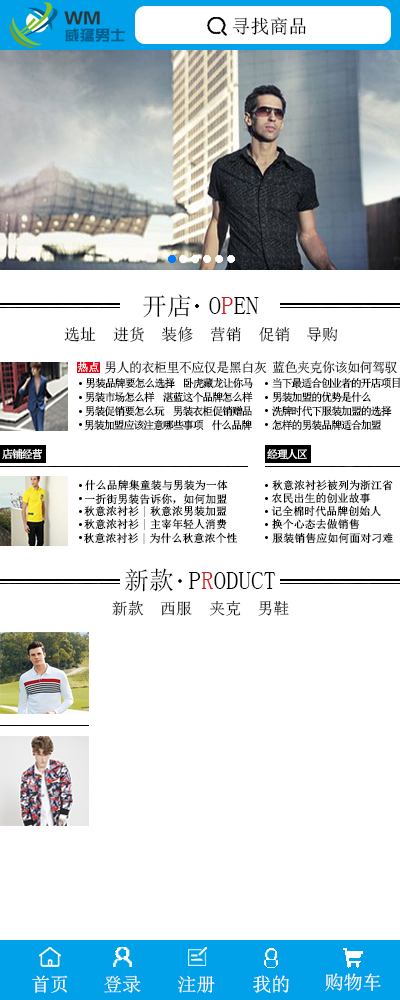
<style>
.page{position:relative;width:400px;height:1000px;background:#ffffff}
.page>*{position:absolute;margin:0}
.t1{font:19px "SimSun";color:#000000}
.t2{font:25px "SimSun";color:#000000}
.t3{font:25px "SimSun";color:#d01a21}
.t4{font:16px "SimSun";color:#000000}
.t5{font:11px "NSimSun";color:#ffffff}
.t6{font:13.2px "NSimSun";letter-spacing:-0.049em;color:#000000}
.t7{font:11px "NSimSun";letter-spacing:-0.1em;color:#000000}
.t8{font:12px "NSimSun";letter-spacing:-0.1em;color:#000000}
.t9{font:11px "NSimSun";letter-spacing:-0.1em;color:#ffffff}
.t10{font:11px "SimSun";color:#000000}
.t11{font:19px "SimSun";color:#ffffff}
</style>
<div class="page">
<p class="t1" style="left:232px;top:17px;width:74px;height:18px">寻找商品</p>
<p class="t2" style="left:143px;top:294px;width:48px;height:24px">开店</p>
<p class="t2" style="left:209px;top:297px;width:50px;height:17px">O<span class="t3">P</span>EN</p>
<p class="t4" style="left:64px;top:327px;width:32px;height:15px">选址</p>
<p class="t4" style="left:113px;top:326px;width:31px;height:16px">进货</p>
<p class="t4" style="left:162px;top:326px;width:31px;height:16px">装修</p>
<p class="t4" style="left:211px;top:326px;width:30px;height:16px">营销</p>
<p class="t4" style="left:259px;top:327px;width:31px;height:15px">促销</p>
<p class="t4" style="left:307px;top:326px;width:31px;height:16px">导购</p>
<p class="t5" style="left:77px;top:361px;width:22px;height:11px">热点</p>
<p class="t6" style="left:105px;top:361px;width:292px;height:13px">男人的衣柜里不应仅是黑白灰 蓝色夹克你该如何驾驭</p>
<p class="t7" style="left:85px;top:377px;width:168px;height:12px">男装品牌要怎么选择  卧虎藏龙让你马</p>
<p class="t7" style="left:272px;top:377px;width:128px;height:12px">当下最适合创业者的开店项<span class="t8">目</span></p>
<p class="t7" style="left:85px;top:391px;width:168px;height:12px">男装市场怎么样  湛蓝这个品牌怎么样</p>
<p class="t7" style="left:272px;top:391px;width:99px;height:12px">男装加盟的优势是什么</p>
<p class="t7" style="left:85px;top:405px;width:167px;height:12px">男装促销要怎么玩  男装衣柜促销赠品</p>
<p class="t7" style="left:272px;top:405px;width:120px;height:12px">洗牌时代下服装加盟的选择</p>
<p class="t7" style="left:84px;top:419px;width:168px;height:12px">男装加盟应该注意哪些事项  什么品牌</p>
<p class="t7" style="left:272px;top:419px;width:110px;height:12px">怎样的男装品牌适合加盟</p>
<p class="t9" style="left:2px;top:448px;width:41px;height:12px">店铺经营</p>
<p class="t9" style="left:267px;top:449px;width:40px;height:11px">经理人区</p>
<p class="t10" style="left:85px;top:479px;width:143px;height:12px">什么品牌集童装与男装为一体</p>
<p class="t10" style="left:272px;top:479px;width:121px;height:12px">秋意浓衬衫被列为浙江省</p>
<p class="t10" style="left:84px;top:493px;width:143px;height:12px">一折街男装告诉你，如何加盟</p>
<p class="t10" style="left:271px;top:492px;width:99px;height:12px">农民出生的创业故事</p>
<p class="t10" style="left:84px;top:505px;width:143px;height:12px">秋意浓衬衫|秋意浓男装加盟</p>
<p class="t10" style="left:271px;top:505px;width:110px;height:12px">记全棉时代品牌创始人</p>
<p class="t10" style="left:84px;top:518px;width:143px;height:12px">秋意浓衬衫|主宰年轻人消费</p>
<p class="t10" style="left:272px;top:518px;width:88px;height:12px">换个心态去做销售</p>
<p class="t10" style="left:83px;top:532px;width:155px;height:12px">秋意浓衬衫|为什么秋意浓个性</p>
<p class="t10" style="left:272px;top:532px;width:121px;height:12px">服装销售应如何面对刁难</p>
<p class="t2" style="left:125px;top:568px;width:48px;height:24px">新款</p>
<p class="t2" style="left:189px;top:572px;width:87px;height:17px">P<span class="t3">R</span>ODUCT</p>
<p class="t4" style="left:112px;top:600px;width:32px;height:16px">新款</p>
<p class="t4" style="left:161px;top:601px;width:31px;height:15px">西服</p>
<p class="t4" style="left:210px;top:600px;width:31px;height:16px">夹克</p>
<p class="t4" style="left:258px;top:601px;width:31px;height:15px">男鞋</p>
<p class="t11" style="left:32px;top:975px;width:36px;height:18px">首页</p>
<p class="t11" style="left:104px;top:975px;width:37px;height:18px">登录</p>
<p class="t11" style="left:178px;top:975px;width:37px;height:18px">注册</p>
<p class="t11" style="left:253px;top:975px;width:36px;height:18px">我的</p>
<p class="t11" style="left:325px;top:973px;width:56px;height:18px">购物车</p>
</div>
